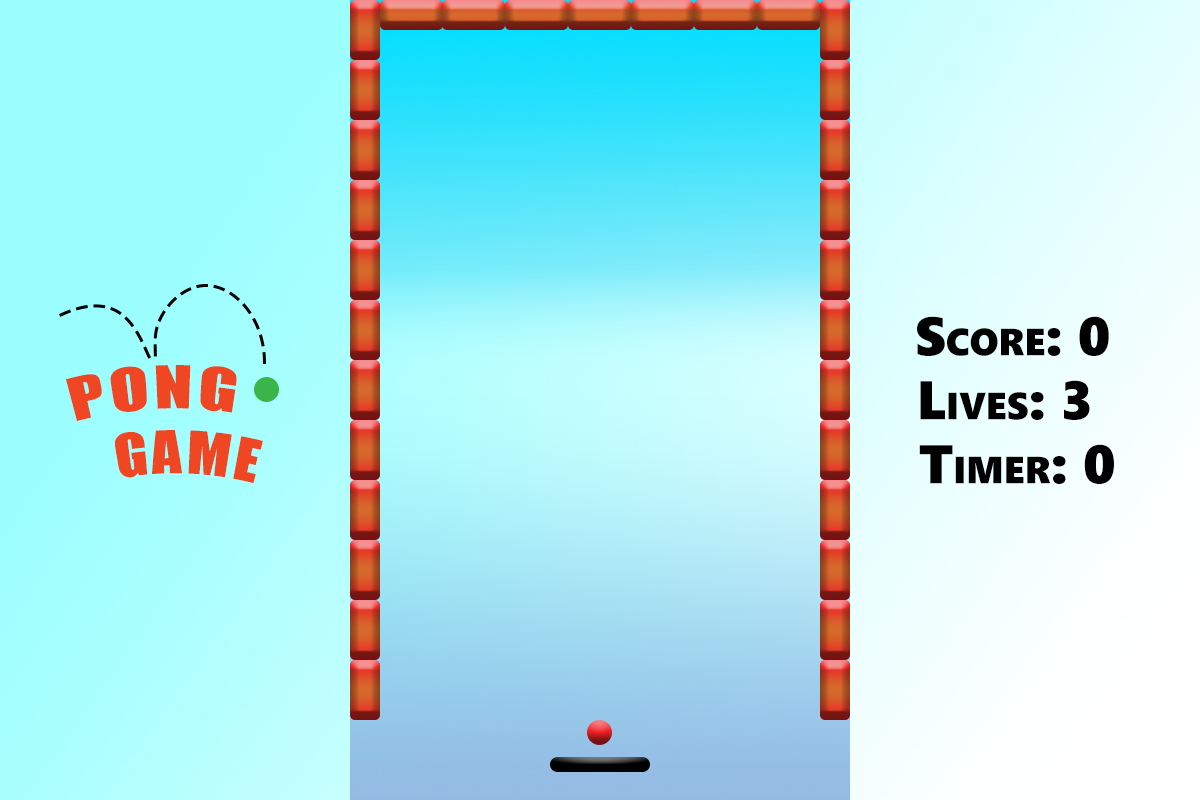
<style>
.page{position:relative;width:1200px;height:800px}
.page>*{position:absolute;margin:0}
.t1{font:54.2px "SegoeUIBlack";color:#000000;font-variant:small-caps}
.t2{font:54.2px "Impact";letter-spacing:0.06em;color:#ef4723;text-transform:uppercase}
</style>
<div class="page">
<p class="t1" style="left:917px;top:316px;width:192px;height:40px">Score: 0</p>
<p class="t2" style="left:66px;top:365px;width:197px;height:118px">Pong <br>  Game</p>
<p class="t1" style="left:920px;top:380px;width:170px;height:40px">Lives: 3</p>
<p class="t1" style="left:919px;top:444px;width:195px;height:40px">Timer: 0</p>
</div>
